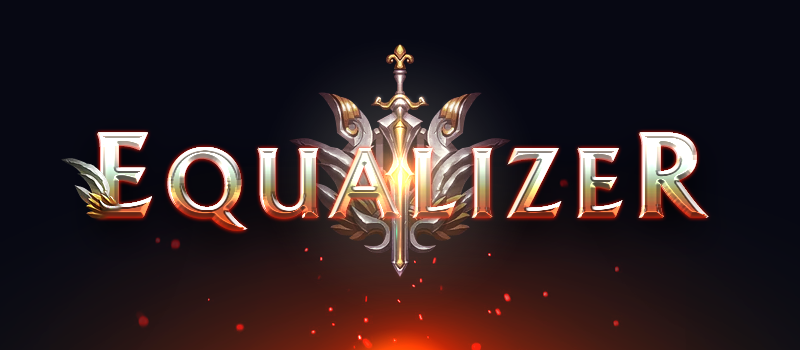
<style>
.page{position:relative;width:800px;height:350px;background:#070813}
.page>*{position:absolute;margin:0}
.t1{font:90px "AlbertusBold-Regular";letter-spacing:0.1em;text-transform:uppercase}
.t2{font:110px "AlbertusBold-Regular";letter-spacing:0.1em;text-transform:uppercase}
</style>
<div class="page">
<p class="t1" style="left:97px;top:133px;width:611px;height:98px"><span class="t2">E</span>qualize<span class="t2">r</span></p>
<p class="t1" style="left:98px;top:132px;width:611px;height:98px"><span class="t2">E</span>qualize<span class="t2">r</span></p>
<p class="t1" style="left:98px;top:132px;width:611px;height:98px"><span class="t2">E</span>qualize<span class="t2">r</span></p>
<p class="t1" style="left:98px;top:132px;width:611px;height:98px"><span class="t2">E</span>qualize<span class="t2">r</span></p>
<p class="t1" style="left:98px;top:132px;width:611px;height:98px"><span class="t2">E</span>qualize<span class="t2">r</span></p>
<p class="t1" style="left:98px;top:132px;width:611px;height:98px"><span class="t2">E</span>qualize<span class="t2">r</span></p>
</div>
